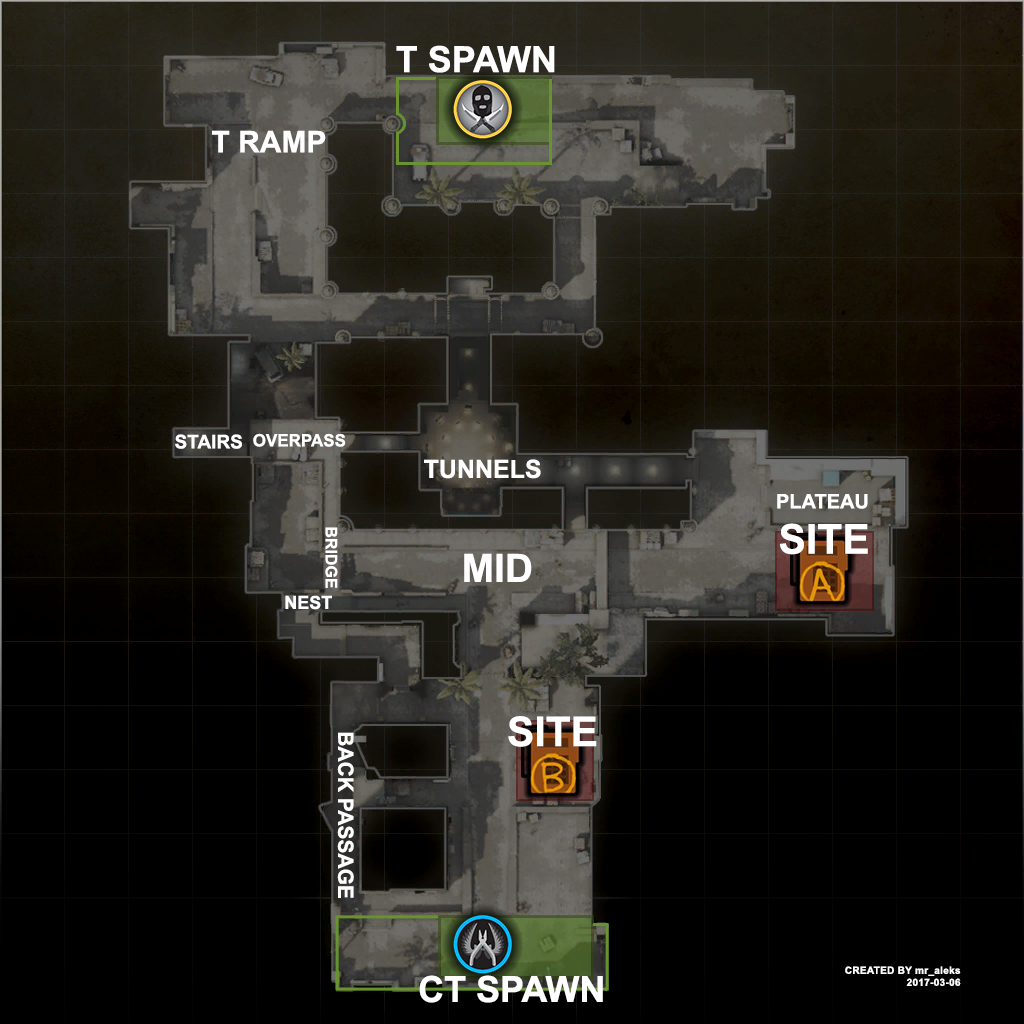
<style>
.page{position:relative;width:1024px;height:1024px;background:#000000}
.page>*{position:absolute;margin:0}
.t1{font:36px "Arial-BoldMT";color:#ffffff;text-transform:uppercase}
.t2{font:30px "Arial-BoldMT";color:#ffffff;text-transform:uppercase}
.t3{font:19px "Arial-BoldMT";color:#ffffff;text-transform:uppercase}
.t4{font:17px "Arial-BoldMT";color:#ffffff;text-transform:uppercase}
.t5{font:25px "Arial-BoldMT";color:#ffffff;text-transform:uppercase}
.t6{font:20px "Arial-BoldMT";color:#ffffff;text-transform:uppercase}
.t7{font:16px "Arial-BoldMT";color:#ffffff;text-transform:uppercase}
.t8{font:41px "Arial-BoldMT";color:#ffffff;text-transform:uppercase}
.t9{font:39px "Arial-BoldMT";color:#ffffff;text-transform:uppercase}
.t10{font:18px "Arial-BoldMT";color:#ffffff;text-transform:uppercase}
.t11{font:21px "Arial-BoldMT";color:#ffffff;text-transform:uppercase}
.t12{font:10px "Arial-BoldMT";letter-spacing:0.03em;color:#ffffff}
.t13{font:10px "Arial-BoldMT";letter-spacing:0.03em;color:#ffffff;text-transform:uppercase}
</style>
<div class="page">
<p class="t1" style="left:396px;top:45px;width:159px;height:28px">t spawn</p>
<p class="t2" style="left:212px;top:130px;width:114px;height:23px">t ramp</p>
<p class="t3" style="left:175px;top:434px;width:67px;height:15px">stairs</p>
<p class="t4" style="left:253px;top:433px;width:93px;height:14px">overpass</p>
<p class="t5" style="left:424px;top:459px;width:117px;height:20px">tunnels</p>
<p class="t6" style="left:777px;top:494px;width:91px;height:15px">plateau</p>
<p class="t7" style="left:325px;top:527px;width:13px;height:61px;rotate:90deg">bridge</p>
<p class="t8" style="left:779px;top:523px;width:89px;height:32px">site</p>
<p class="t9" style="left:464px;top:553px;width:68px;height:29px">mid</p>
<p class="t10" style="left:285px;top:595px;width:47px;height:15px">nest</p>
<p class="t8" style="left:508px;top:716px;width:89px;height:31px">site</p>
<p class="t11" style="left:337px;top:732px;width:17px;height:166px;rotate:90deg">back passage</p>
<p class="t12" style="left:845px;top:966px;width:116px;height:20px;text-align:right"><span class="t13">created by </span>mr_aleks<br>2017-03-06</p>
<p class="t1" style="left:419px;top:975px;width:184px;height:28px">ct spawn</p>
</div>
